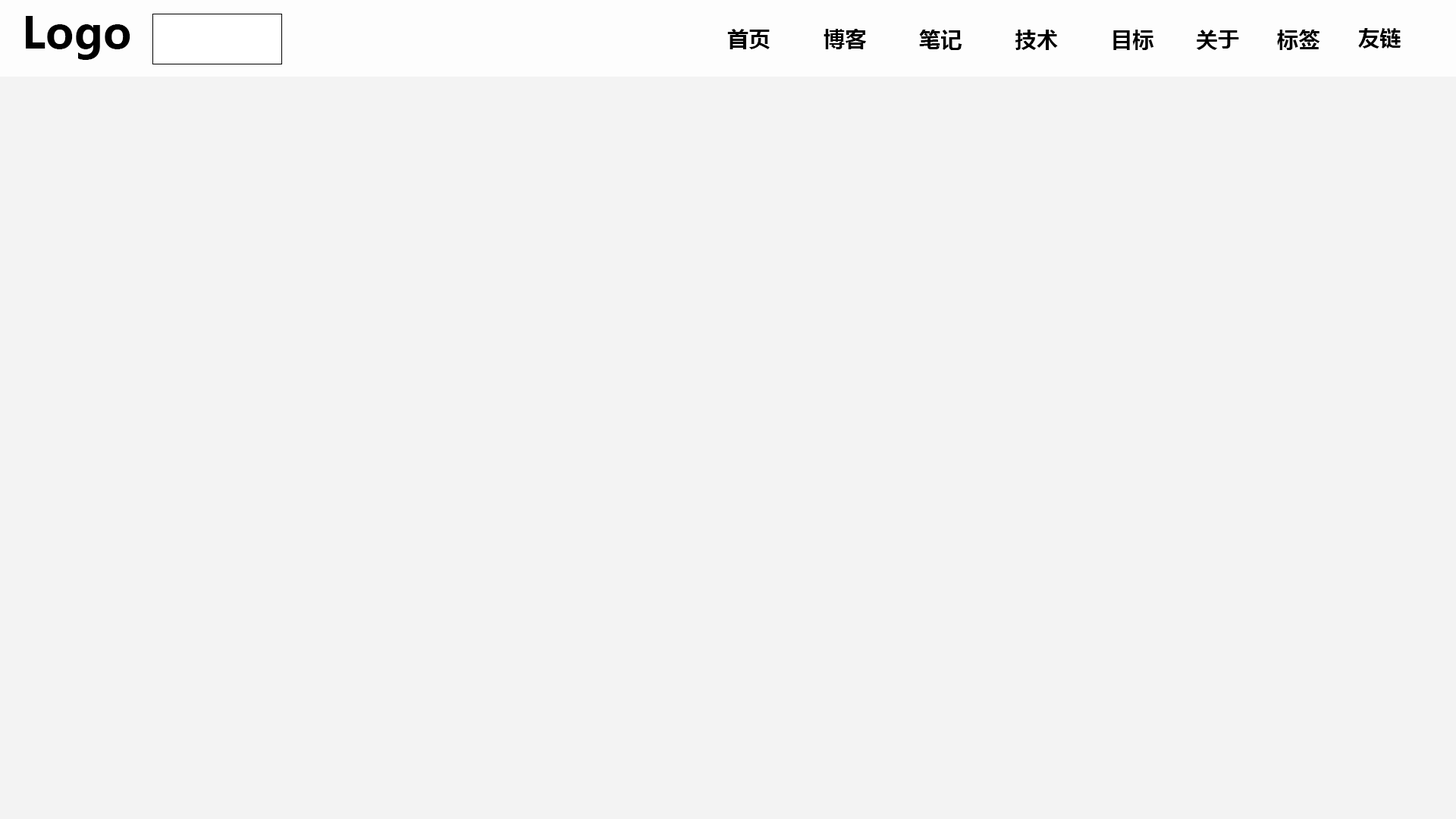
<style>
.page{position:relative;width:1456px;height:819px;background:#f3f3f3}
.page>*{position:absolute;margin:0}
.t1{font:43.1px "MicrosoftYaHei-Bold";color:#000000}
.t2{font:21.6px "MicrosoftYaHei-Bold";color:#000000}
</style>
<div class="page">
<p class="t1" style="left:26px;top:16px;width:104px;height:44px">Logo</p>
<p class="t2" style="left:727px;top:29px;width:43px;height:20px">首页</p>
<p class="t2" style="left:824px;top:29px;width:42px;height:20px">博客</p>
<p class="t2" style="left:919px;top:30px;width:43px;height:20px">笔记</p>
<p class="t2" style="left:1015px;top:30px;width:43px;height:20px">技术</p>
<p class="t2" style="left:1113px;top:30px;width:41px;height:20px">目标</p>
<p class="t2" style="left:1196px;top:30px;width:43px;height:20px">关于</p>
<p class="t2" style="left:1277px;top:30px;width:43px;height:20px">标签</p>
<p class="t2" style="left:1358px;top:28px;width:43px;height:21px">友链</p>
</div>
